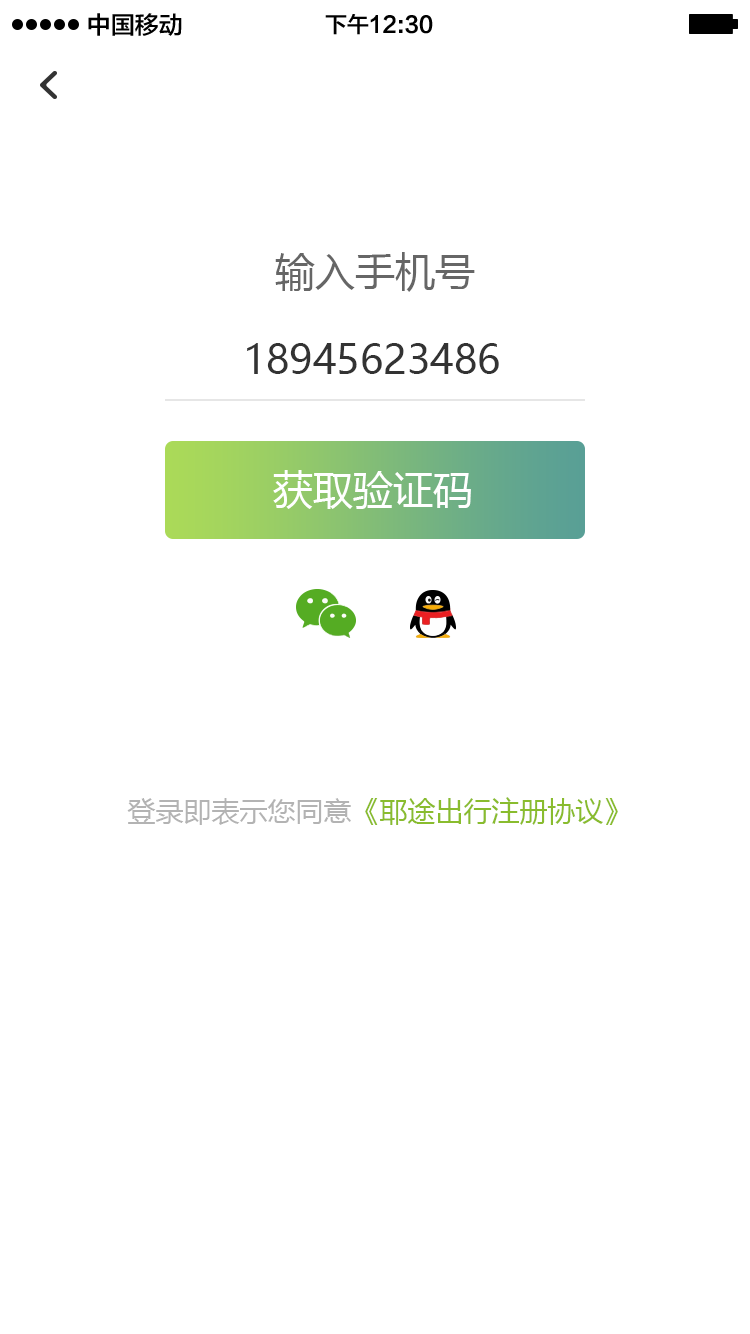
<style>
.page{position:relative;width:750px;height:1334px;background:#ffffff}
.page>*{position:absolute;margin:0}
.t1{font:24px "FZLTZHK--GBK1-0";color:#000000}
.t2{font:22px "FZLTZHK--GBK1-0";color:#000000}
.t3{font:40px "MicrosoftYaHei";color:#666666}
.t4{font:40px "MicrosoftYaHei";color:#333333}
.t5{font:40px "MicrosoftYaHei";color:#ffffff}
.t6{font:28px "MicrosoftYaHei";color:#89bc2e}
.t7{font:28px "MicrosoftYaHei";color:#b3b3b3}
</style>
<div class="page">
<p class="t1" style="left:88px;top:13px;width:94px;height:23px">中国移动</p>
<p class="t2" style="left:325px;top:14px;width:108px;height:21px">下午12:30</p>
<p class="t3" style="left:275px;top:252px;width:200px;height:40px">输入手机号</p>
<p class="t4" style="left:247px;top:343px;width:252px;height:31px">18945623486</p>
<p class="t5" style="left:273px;top:470px;width:198px;height:39px">获取验证码</p>
<p class="t6" style="left:127px;top:797px;width:491px;height:28px"><span class="t7">登录即表示您同意</span>《耶途出行注册协议》</p>
</div>
